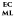
<style>
.page{position:relative;width:16px;height:16px;background:#ffffff}
.page>*{position:absolute;margin:0}
.t1{font:7.2px "TrajanPro3-Bold";color:#000000}
</style>
<div class="page">
<p class="t1" style="left:1px;top:2px;width:13px;height:14px;text-align:center">ec<br>ml</p>
</div>
